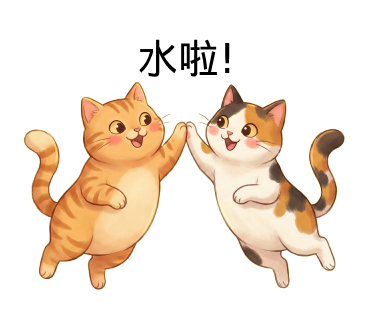
<style>
.page{position:relative;width:370px;height:320px;background:#ffffff}
.page>*{position:absolute;margin:0}
.t1{font:41px "DroidSansFallback";color:#000000}
.t2{font:41px "DejaVuSans";color:#000000}
</style>
<div class="page">
<p class="t1" style="left:139px;top:39px;width:91px;height:38px">水啦<span class="t2">!</span></p>
</div>
